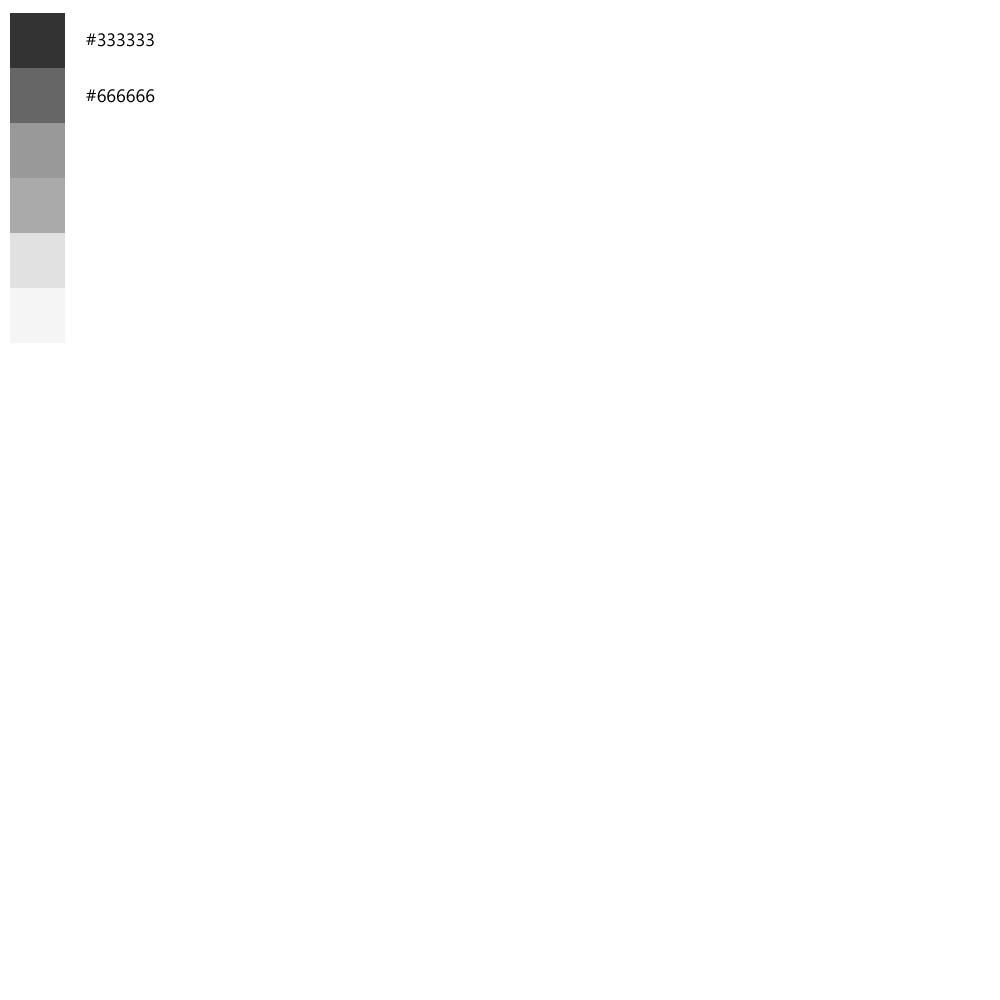
<style>
.page{position:relative;width:1000px;height:1000px;background:#ffffff}
.page>*{position:absolute;margin:0}
.t1{font:18px "SegoeUI";color:#000000;font-variant:small-caps}
</style>
<div class="page">
<p class="t1" style="left:86px;top:33px;width:68px;height:14px">#333333</p>
<p class="t1" style="left:86px;top:89px;width:69px;height:14px">#666666</p>
</div>
